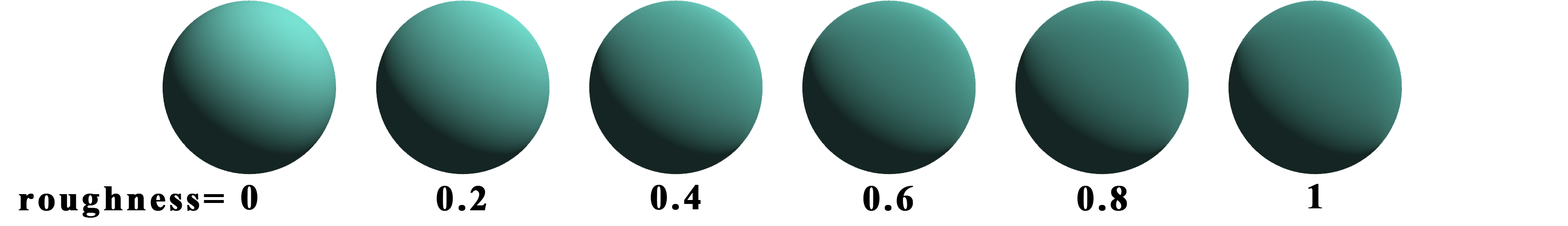
<style>
.page{position:relative;width:1568px;height:226px;background:#ffffff}
.page>*{position:absolute;margin:0}
.t1{font:35.3px "TimesNewRomanPS-BoldMT";letter-spacing:0.075em;color:#000000;font-weight:bold}
</style>
<div class="page">
<p class="t1" style="left:241px;top:185px;width:17px;height:25px">0</p>
<p class="t1" style="left:436px;top:186px;width:50px;height:25px">0.2</p>
<p class="t1" style="left:651px;top:185px;width:50px;height:25px">0.4</p>
<p class="t1" style="left:863px;top:186px;width:50px;height:25px">0.6</p>
<p class="t1" style="left:1077px;top:186px;width:50px;height:25px">0.8</p>
<p class="t1" style="left:1308px;top:184px;width:14px;height:24px">1</p>
<p class="t1" style="left:19px;top:186px;width:205px;height:31px">roughness=</p>
</div>
